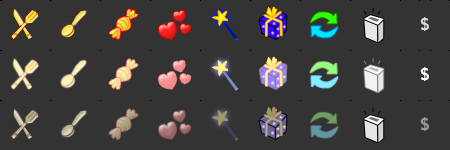
<style>
.page{position:relative;width:450px;height:150px;background:#333333}
.page>*{position:absolute;margin:0}
.t1{font:15px "HoboR";color:#d9d9d9}
</style>
<div class="page">
<p class="t1" style="left:420px;top:17px;width:9px;height:14px">$</p>
</div>
